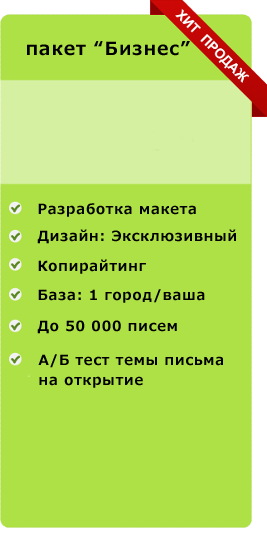
<style>
.page{position:relative;width:267px;height:550px;background:#aee146}
.page>*{position:absolute;margin:0}
.t1{font:18px "Meiryo-Bold";letter-spacing:0.06em;color:#000000;font-variant:small-caps}
.t2{font:14px "Meiryo-Bold";letter-spacing:0.06em;color:#010101;font-variant:small-caps}
.t3{font:14px "Meiryo-Bold";letter-spacing:0.06em;color:#000000;font-variant:small-caps}
</style>
<div class="page">
<p class="t1" style="left:27px;top:41px;width:163px;height:15px">пакет “Бизнес”</p>
<p class="t2" style="left:38px;top:203px;width:158px;height:14px">Разработка макета</p>
<p class="t3" style="left:37px;top:229px;width:199px;height:15px">Дизайн: Эксклюзивный</p>
<p class="t3" style="left:38px;top:259px;width:108px;height:15px">Копирайтинг</p>
<p class="t3" style="left:38px;top:289px;width:167px;height:14px">База: 1 город/ваша</p>
<p class="t3" style="left:37px;top:320px;width:140px;height:14px">До 50 000 писем</p>
<p class="t3" style="left:38px;top:354px;width:185px;height:14px">А/Б тест темы письма</p>
<p class="t3" style="left:39px;top:376px;width:104px;height:12px">на открытие</p>
</div>
